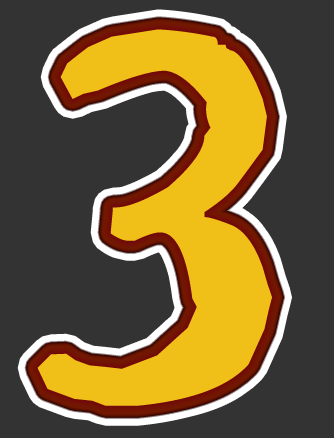
<style>
.page{position:relative;width:334px;height:438px;background:#333333}
.page>*{position:absolute;margin:0}
.t1{font:550px "PiecesofEight";letter-spacing:0.18em;color:#f0c018}
</style>
<div class="page">
<p class="t1" style="left:37px;top:29px;width:235px;height:377px">3</p>
</div>
